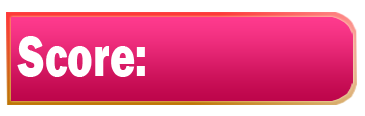
<style>
.page{position:relative;width:365px;height:116px;background:#ffffff}
.page>*{position:absolute;margin:0}
.t1{font:58.1px "FranklinGothic-Heavy";color:#ffffff;scale:0.75 1}
</style>
<div class="page">
<p class="t1" style="left:17px;top:36px;width:128px;height:41px">:Score</p>
</div>
